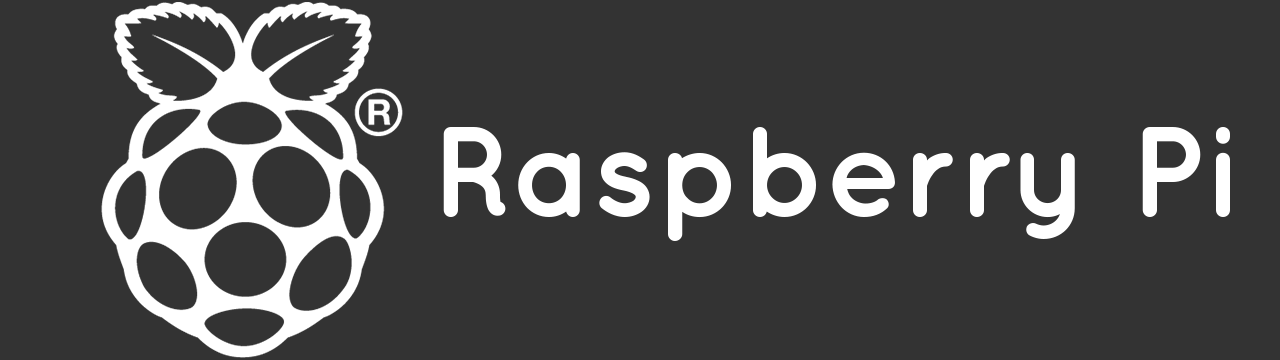
<style>
.page{position:relative;width:1280px;height:360px;background:#333333}
.page>*{position:absolute;margin:0}
.t1{font:128.7px "Quicksand-Bold";color:#ffffff}
</style>
<div class="page">
<p class="t1" style="left:443px;top:127px;width:787px;height:114px">Raspberry Pi</p>
</div>
